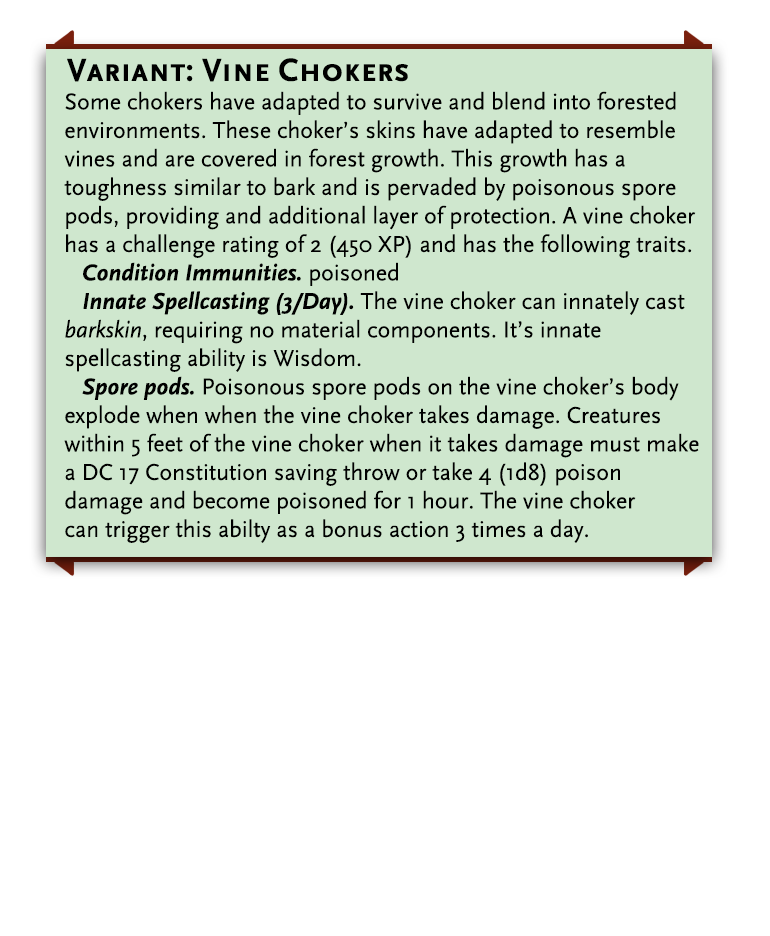
<style>
.page{position:relative;width:770px;height:936px;background:#ffffff}
.page>*{position:absolute;margin:0}
.t1{font:33.3px "ScalaSansCaps-Bold";color:#000000}
.t2{font:23.8px "ScalaSans-Regular";color:#000000}
.t3{font:23.8px "ScalaSans-BoldItalic";color:#000000}
.t4{font:23.8px "ScalaSans-Italic";color:#000000}
</style>
<div class="page">
<p class="t1" style="left:67px;top:58px;width:341px;height:24px">Variant: Vine Chokers</p>
<p class="t2" style="left:64px;top:91px;width:635px;height:452px">Some chokers have adapted to survive and blend into forested <br>environments. These choker’s skins have adapted to resemble <br>vines and are covered in forest growth. This growth has a <br>toughness similar to bark and is pervaded by poisonous spore <br>pods, providing and additional layer of protection. A vine choker<br>has a challenge rating of 2 (450 XP) and has the following traits.<br>   <span class="t3">Condition Immunities. </span>poisoned<br>   <span class="t3">Innate Spellcasting (3/Day). </span>The vine choker can innately cast<br><span class="t4">barkskin</span>, requiring no material components. It’s innate <br>spellcasting ability is Wisdom.<br>   <span class="t3">Spore pods. </span>Poisonous spore pods on the vine choker’s body<br>explode when when the vine choker takes damage. Creatures<br>within 5 feet of the vine choker when it takes damage must make<br>a DC 17 Constitution saving throw or take 4 (1d8) poison <br>damage and become poisoned for 1 hour. The vine choker<br>can trigger this abilty as a bonus action 3 times a day.</p>
</div>
